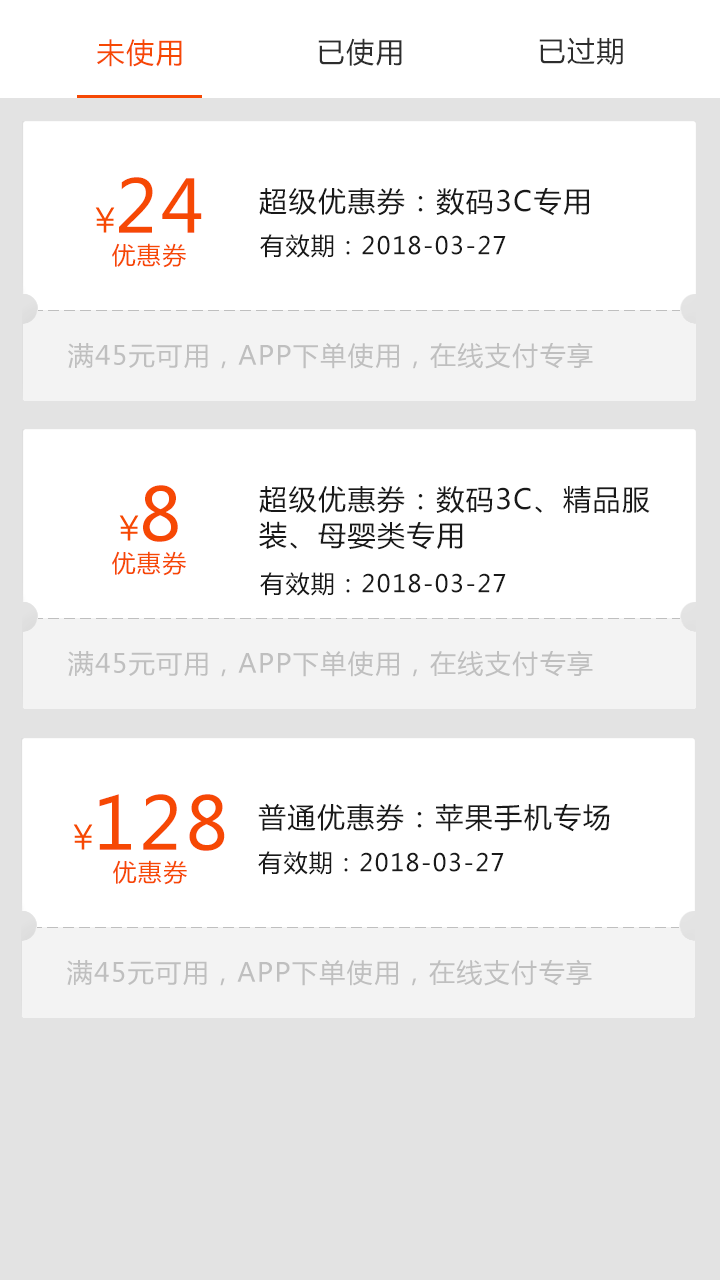
<style>
.page{position:relative;width:720px;height:1280px;background:#ffffff}
.page>*{position:absolute;margin:0}
.t1{font:28px "MicrosoftYaHei";letter-spacing:0.055em;color:#f64804;text-transform:uppercase}
.t2{font:28px "MicrosoftYaHei";letter-spacing:0.055em;color:#2d2d2d;text-transform:uppercase}
.t3{font:72px "MicrosoftYaHei";letter-spacing:0.055em;color:#f64804;text-transform:uppercase}
.t4{font:28px "MicrosoftYaHei";letter-spacing:0.055em;color:#191919;text-transform:uppercase}
.t5{font:24px "MicrosoftYaHei";letter-spacing:0.055em;color:#f64804;text-transform:uppercase}
.t6{font:24px "MicrosoftYaHei";letter-spacing:0.055em;color:#191919;text-transform:uppercase}
.t7{font:26px "MicrosoftYaHei";letter-spacing:0.055em;color:#bfbfbf;text-transform:uppercase}
.t8{font:28px/36px "MicrosoftYaHei";letter-spacing:0.055em;color:#191919;text-transform:uppercase}
</style>
<div class="page">
<p class="t1" style="left:97px;top:39px;width:85px;height:28px">未使用</p>
<p class="t2" style="left:318px;top:38px;width:84px;height:28px">已使用</p>
<p class="t2" style="left:539px;top:37px;width:84px;height:28px">已过期</p>
<p class="t3" style="left:119px;top:177px;width:83px;height:56px">24</p>
<p class="t4" style="left:259px;top:188px;width:330px;height:28px">超级优惠券：数码3C专用</p>
<p class="t5" style="left:112px;top:243px;width:74px;height:25px">优惠券</p>
<p class="t6" style="left:260px;top:234px;width:246px;height:24px">有效期：2018-03-27</p>
<p class="t7" style="left:68px;top:342px;width:525px;height:27px">满45元可用，APP下单使用，在线支付专享</p>
<p class="t3" style="left:143px;top:485px;width:35px;height:57px">8</p>
<p class="t8" style="left:259px;top:486px;width:391px;height:64px">超级优惠券：数码3C、精品服<br>装、母婴类专用</p>
<p class="t5" style="left:112px;top:551px;width:74px;height:25px">优惠券</p>
<p class="t6" style="left:260px;top:572px;width:246px;height:24px">有效期：2018-03-27</p>
<p class="t7" style="left:68px;top:650px;width:525px;height:27px">满45元可用，APP下单使用，在线支付专享</p>
<p class="t3" style="left:99px;top:794px;width:126px;height:57px">128</p>
<p class="t4" style="left:258px;top:803px;width:352px;height:29px">普通优惠券：苹果手机专场</p>
<p class="t6" style="left:258px;top:851px;width:246px;height:24px">有效期：2018-03-27</p>
<p class="t5" style="left:113px;top:860px;width:74px;height:25px">优惠券</p>
<p class="t7" style="left:67px;top:959px;width:525px;height:27px">满45元可用，APP下单使用，在线支付专享</p>
</div>
